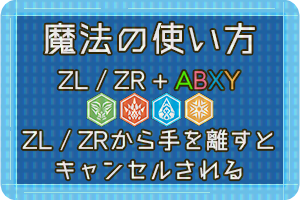
<style>
.page{position:relative;width:300px;height:200px}
.page>*{position:absolute;margin:0}
.t1{font:24px/30px "Makinas-4-Flat"}
.t2{font:36px/48px "Makinas-4-Flat"}
</style>
<div class="page">
<p class="t1" style="left:22px;top:22px;width:252px;height:158px;text-align:center"><span class="t2">魔法の使い方<br></span>ZL / ZR + ABXY<br><br>ZL / ZRから手を離すと<br>キャンセルされる</p>
</div>
